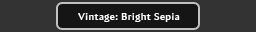
<style>
.page{position:relative;width:256px;height:32px;background:#333333}
.page>*{position:absolute;margin:0}
.t1{font:10px "AmiraParadiso";letter-spacing:0.05em;color:#ffffff}
</style>
<div class="page">
<p class="t1" style="left:78px;top:13px;width:102px;height:9px">Vintage: Bright Sepia</p>
</div>
